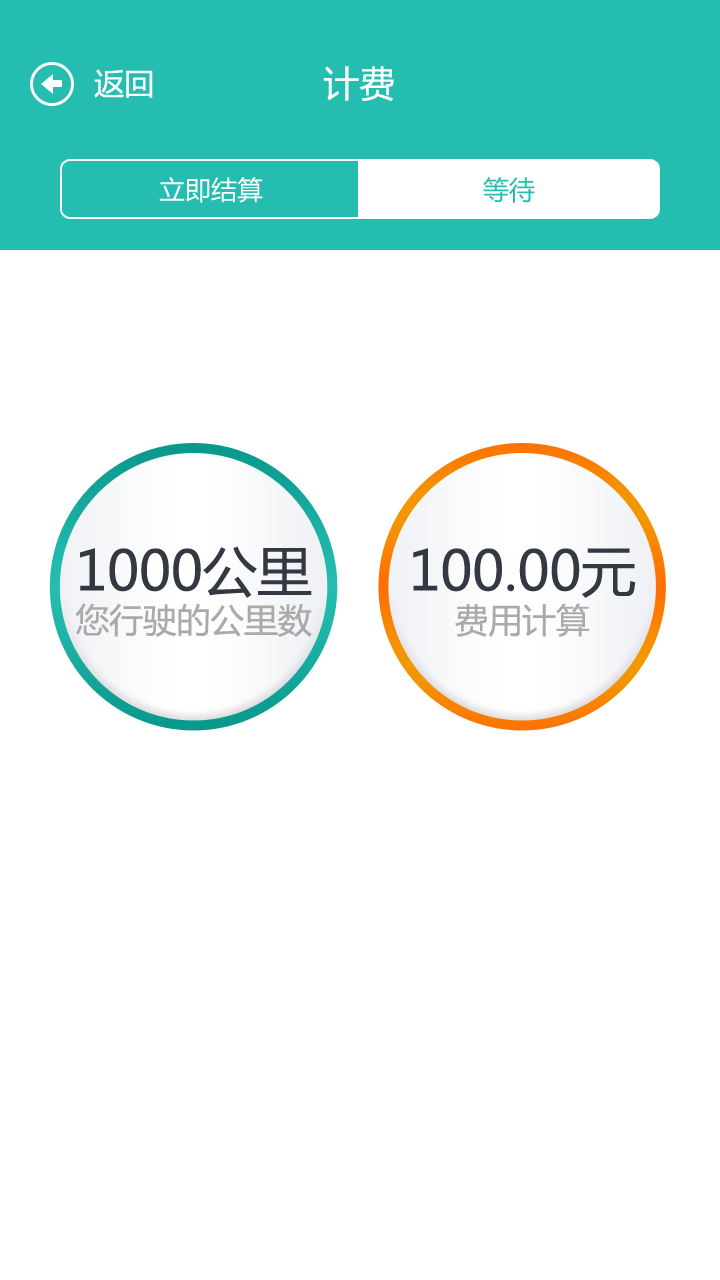
<style>
.page{position:relative;width:720px;height:1280px;background:#ffffff}
.page>*{position:absolute;margin:0}
.t1{font:30px "MicrosoftYaHei";color:#ffffff}
.t2{font:36px "MicrosoftYaHei";color:#ffffff}
.t3{font:26px "MicrosoftYaHei";color:#ffffff}
.t4{font:26px "MicrosoftYaHei";color:#25bdb0}
.t5{font:54.5px "MicrosoftYaHei";color:#343843}
.t6{font:33.8px "MicrosoftYaHei";color:#aaaaaa}
</style>
<div class="page">
<p class="t1" style="left:94px;top:69px;width:59px;height:29px">返回</p>
<p class="t2" style="left:323px;top:66px;width:71px;height:36px">计费</p>
<p class="t3" style="left:159px;top:177px;width:104px;height:26px">立即结算</p>
<p class="t4" style="left:483px;top:177px;width:52px;height:26px">等待</p>
<p class="t5" style="left:80px;top:546px;width:232px;height:52px">1000公里</p>
<p class="t5" style="left:413px;top:548px;width:223px;height:50px">100.00元</p>
<p class="t6" style="left:75px;top:603px;width:237px;height:34px">您行驶的公里数</p>
<p class="t6" style="left:455px;top:603px;width:135px;height:34px">费用计算</p>
</div>
